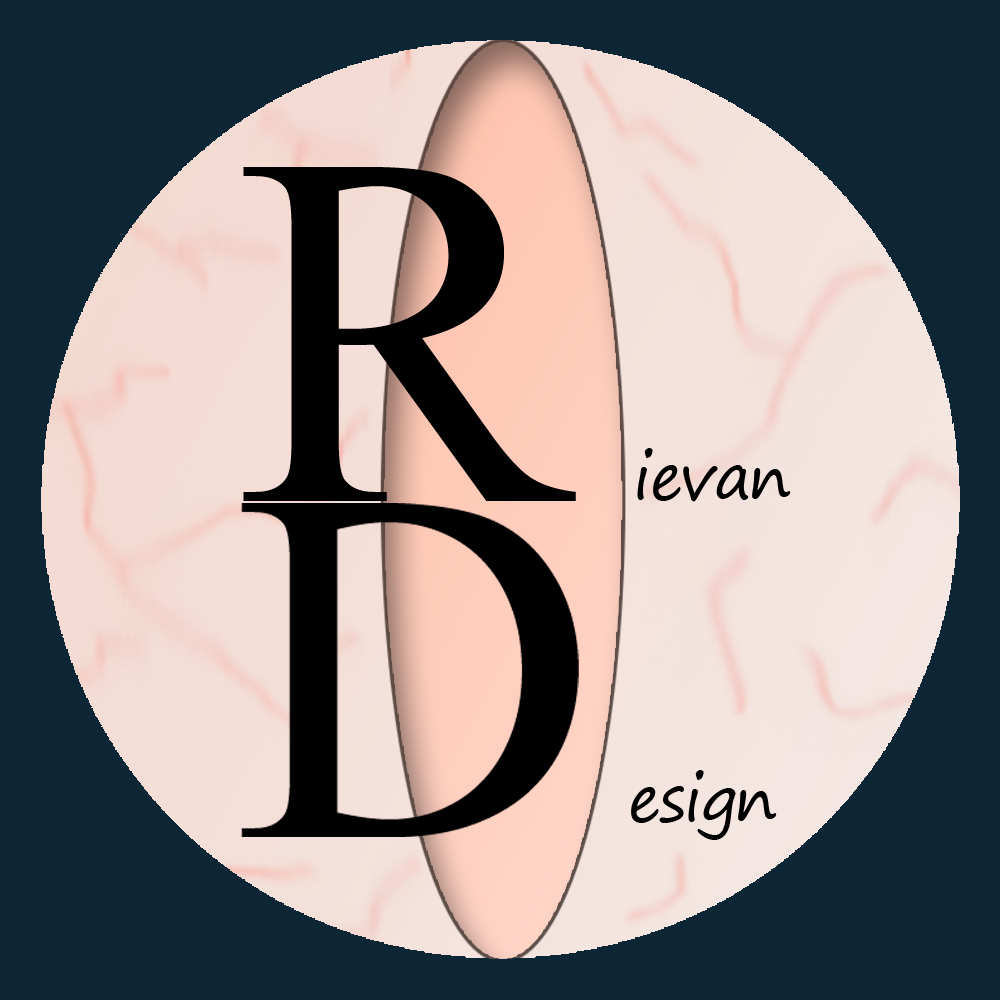
<style>
.page{position:relative;width:1000px;height:1000px;background:#0c2635}
.page>*{position:absolute;margin:0}
.t1{font:504.2px "MongolianBaiti";letter-spacing:-0.025em;color:#000000}
.t2{font:63px "SegoePrint";letter-spacing:-0.025em;color:#000000}
</style>
<div class="page">
<p class="t1" style="left:243px;top:167px;width:333px;height:334px">R</p>
<p class="t2" style="left:637px;top:448px;width:154px;height:54px">ievan</p>
<p class="t2" style="left:631px;top:770px;width:146px;height:70px">esign</p>
</div>
